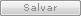
<style>
.page{position:relative;width:81px;height:16px}
.page>*{position:absolute;margin:0}
.t1{font:10px "Verdana";color:#8f8e8e}
</style>
<div class="page">
<p class="t1" style="left:24px;top:3px;width:33px;height:8px">Salvar</p>
</div>
